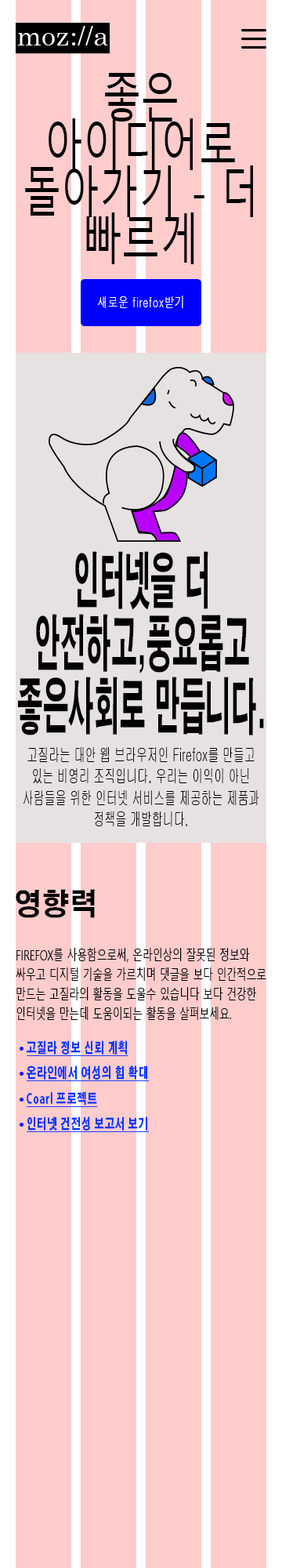
<style>
.page{position:relative;width:282px;height:1568px;background:#ffcccc}
.page>*{position:absolute;margin:0}
.t1{font:54.9px/47px "MalgunGothic";letter-spacing:0.01em;color:#000000;scale:0.7 1}
.t2{font:14.1px "Dotum";letter-spacing:0.05em;color:#fafafa;scale:0.7 1}
.t3{font:61.2px/62.7px "H2gtrE";letter-spacing:0.01em;color:#000000;scale:0.42 1}
.t4{font:18px "Gulim";letter-spacing:0.01em;color:#000000;scale:0.6 1}
.t5{font:30px "H2gtrE";letter-spacing:0.01em;color:#000000;scale:0.92 1}
.t6{font:14.1px/19.6px "MalgunGothic";letter-spacing:0.01em;color:#000000;scale:0.7 1}
.t7{font:14.2px "AdobeGothicStd-Bold";letter-spacing:0.075em;color:#0036ff;text-decoration:underline;scale:0.68 1}
</style>
<div class="page">
<p class="t1" style="left:25px;top:73px;width:228px;height:191px;text-align:center">좋은 아이디어로 돌아가기 - 더 빠르게</p>
<p class="t2" style="left:98px;top:296px;width:85px;height:12px">새로운 firefox받기</p>
<p class="t3" style="left:18px;top:551px;width:246px;height:184px;text-align:center">인터넷을 더 안전하고,풍요롭고 좋은사회로 만듭니다.</p>
<p class="t4" style="left:24px;top:747px;width:235px;height:79px;text-align:center">고질라는 대안 웹 브라우저인 Firefox를 만들고 있는 비영리 조직입니다. 우리는 이익이 아닌 사람들을 위한 인터넷 서비스를 제공하는 제품과 정책을 개발합니다.</p>
<p class="t5" style="left:16px;top:889px;width:80px;height:29px">영향력</p>
<p class="t6" style="left:16px;top:948px;width:251px;height:72px">FIREFOX를 사용함으로써, 온라인상의 잘못된 정보와 싸우고 디지털 기술을 가르치며 댓글을 보다 인간적으로 만드는 고질라의 활동을 도울수 있습니다 보다 건강한 인터넷을 만는데 도움이되는 활동을 살펴보세요.</p>
<p class="t7" style="left:26px;top:1040px;width:103px;height:17px">고질라 정보 신뢰 계획</p>
<p class="t7" style="left:27px;top:1065px;width:122px;height:17px">온라인에서 여성의 힘 확대</p>
<p class="t7" style="left:27px;top:1091px;width:71px;height:17px">Coarl 프로젝트</p>
<p class="t7" style="left:27px;top:1116px;width:122px;height:17px">인터넷 건전성 보고서 보기</p>
</div>
